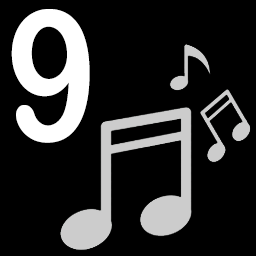
<style>
.page{position:relative;width:256px;height:256px;background:#000000}
.page>*{position:absolute;margin:0}
.t1{font:182.4px "ArialRoundedMTBold";letter-spacing:-0.4em;color:#ffffff;font-variant:small-caps;scale:0.83 1}
</style>
<div class="page">
<p class="t1" style="left:11px;top:9px;width:79px;height:134px">9</p>
</div>
